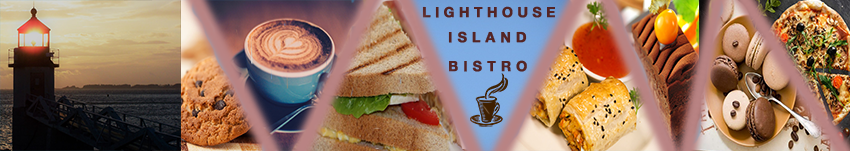
<style>
.page{position:relative;width:850px;height:151px}
.page>*{position:absolute;margin:0}
.t1{font:14px "HelveticaNeueBold";letter-spacing:0.3em;color:#542424;font-weight:bold}
.t2{font:14px "HelveticaNeueBold";letter-spacing:0.35em;color:#542424;font-weight:bold}
</style>
<div class="page">
<p class="t1" style="left:422px;top:6px;width:133px;height:12px">LIGHTHOUSE</p>
<p class="t2" style="left:448px;top:31px;width:79px;height:12px">ISLAND</p>
<p class="t2" style="left:449px;top:60px;width:78px;height:12px">BISTRO</p>
</div>
